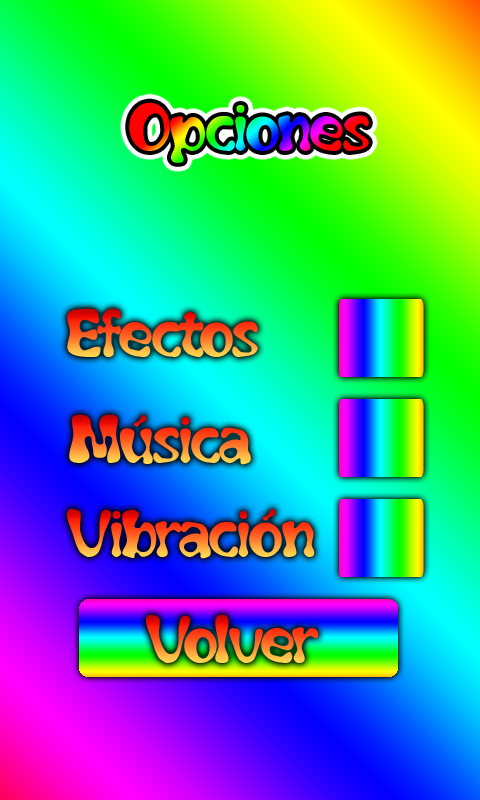
<style>
.page{position:relative;width:480px;height:800px}
.page>*{position:absolute;margin:0}
.t1{font:60px "Flubber"}
</style>
<div class="page">
<p class="t1" style="left:67px;top:308px;width:191px;height:49px">Efectos</p>
<p class="t1" style="left:69px;top:414px;width:182px;height:51px">Música</p>
<p class="t1" style="left:67px;top:508px;width:248px;height:51px">Vibración</p>
<p class="t1" style="left:146px;top:614px;width:173px;height:49px">Volver</p>
</div>
